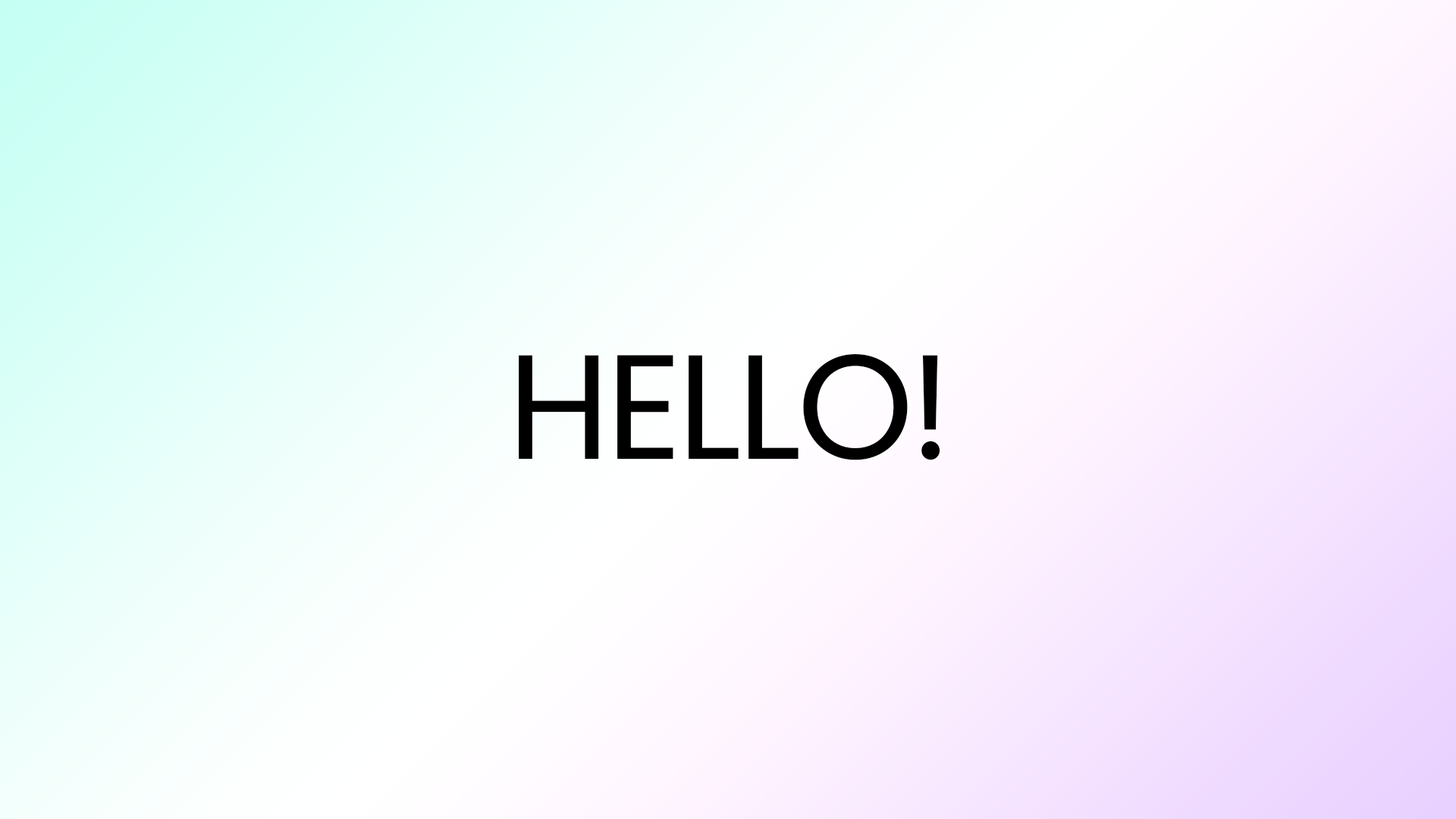
<style>
.page{position:relative;width:1456px;height:819px}
.page>*{position:absolute;margin:0}
.t1{font:148.4px "Poppins-Regular";letter-spacing:-0.03em;color:#000000}
</style>
<div class="page">
<p class="t1" style="left:519px;top:354px;width:421px;height:106px">HELLO!</p>
<p class="t1" style="left:519px;top:354px;width:421px;height:106px">HELLO!</p>
</div>
